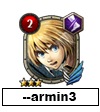
<style>
.page{position:relative;width:100px;height:112px;background:#ffffff}
.page>*{position:absolute;margin:0}
.t1{font:12px "Arial-Black";color:#000000}
</style>
<div class="page">
<p class="t1" style="left:23px;top:92px;width:53px;height:9px">--armin3</p>
</div>
